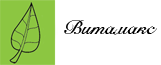
<style>
.page{position:relative;width:161px;height:65px;background:#ffffff}
.page>*{position:absolute;margin:0}
.t1{font:19.1px "SnellRoundhand-Bold";color:#000000}
</style>
<div class="page">
<p class="t1" style="left:64px;top:20px;width:93px;height:15px">Витамакс</p>
</div>
